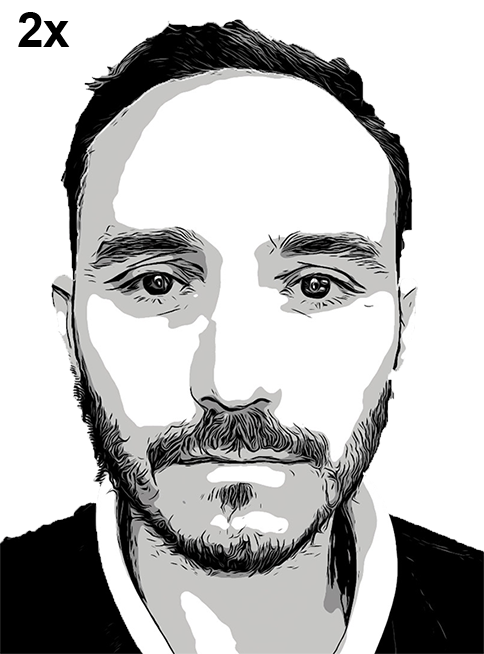
<style>
.page{position:relative;width:484px;height:654px;background:#ffffff}
.page>*{position:absolute;margin:0}
.t1{font:48px "Arial-BoldMT";color:#000000}
</style>
<div class="page">
<p class="t1" style="left:18px;top:12px;width:52px;height:35px">2x</p>
</div>
